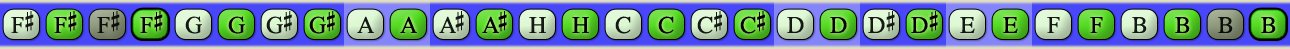
<style>
.page{position:relative;width:1290px;height:49px}
.page>*{position:absolute;margin:0}
.t1{font:24px "OpusChords";color:#000000}
.t2{font:24px "OpusChords";letter-spacing:-0.025em;color:#000000}
.t3{font:24px "OpusChords";letter-spacing:-0.1em;color:#000000}
</style>
<div class="page">
<p class="t1" style="left:11px;top:11px;width:23px;height:22px;opacity:0.9">F#</p>
<p class="t1" style="left:54px;top:11px;width:23px;height:22px">F#</p>
<p class="t1" style="left:97px;top:11px;width:23px;height:22px;opacity:0.9">F#</p>
<p class="t1" style="left:140px;top:11px;width:23px;height:22px">F#</p>
<p class="t1" style="left:185px;top:16px;width:17px;height:18px;opacity:0.9">G</p>
<p class="t1" style="left:228px;top:16px;width:17px;height:18px">G</p>
<p class="t2" style="left:266px;top:11px;width:26px;height:23px;opacity:0.9">G#</p>
<p class="t2" style="left:309px;top:11px;width:26px;height:23px">G#</p>
<p class="t1" style="left:357px;top:16px;width:17px;height:17px;opacity:0.9">A</p>
<p class="t1" style="left:400px;top:16px;width:17px;height:17px">A</p>
<p class="t3" style="left:439px;top:11px;width:25px;height:22px;opacity:0.9">A#</p>
<p class="t3" style="left:482px;top:11px;width:25px;height:22px">A#</p>
<p class="t1" style="left:529px;top:17px;width:17px;height:16px;opacity:0.9">H</p>
<p class="t1" style="left:572px;top:17px;width:17px;height:16px">H</p>
<p class="t1" style="left:615px;top:16px;width:16px;height:18px;opacity:0.9">C</p>
<p class="t1" style="left:658px;top:16px;width:16px;height:18px">C</p>
<p class="t1" style="left:697px;top:11px;width:25px;height:23px;opacity:0.9">C#</p>
<p class="t1" style="left:740px;top:11px;width:25px;height:23px">C#</p>
<p class="t1" style="left:787px;top:17px;width:17px;height:16px;opacity:0.9">D</p>
<p class="t1" style="left:830px;top:17px;width:17px;height:16px">D</p>
<p class="t1" style="left:868px;top:11px;width:27px;height:22px;opacity:0.9">D#</p>
<p class="t1" style="left:911px;top:11px;width:27px;height:22px">D#</p>
<p class="t1" style="left:960px;top:17px;width:15px;height:16px;opacity:0.9">E</p>
<p class="t1" style="left:1003px;top:17px;width:15px;height:16px">E</p>
<p class="t1" style="left:1047px;top:17px;width:13px;height:16px;opacity:0.9">F</p>
<p class="t1" style="left:1090px;top:17px;width:13px;height:16px">F</p>
<p class="t1" style="left:1132px;top:17px;width:15px;height:16px;opacity:0.9">B</p>
<p class="t1" style="left:1175px;top:17px;width:15px;height:16px">B</p>
<p class="t1" style="left:1218px;top:17px;width:15px;height:16px;opacity:0.9">B</p>
<p class="t1" style="left:1261px;top:17px;width:15px;height:16px">B</p>
</div>
